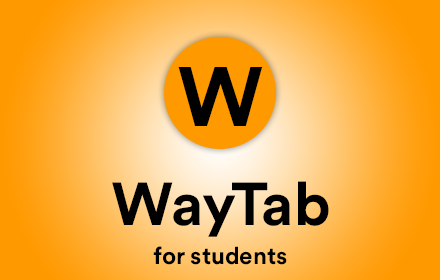
<style>
.page{position:relative;width:440px;height:280px}
.page>*{position:absolute;margin:0}
.t1{font:60px "CircularBold";color:#000000}
.t2{font:24px "CircularBold";color:#000000}
</style>
<div class="page">
<p class="t1" style="left:112px;top:181px;width:217px;height:56px">WayTab</p>
<p class="t2" style="left:153px;top:246px;width:134px;height:19px">for students</p>
</div>
